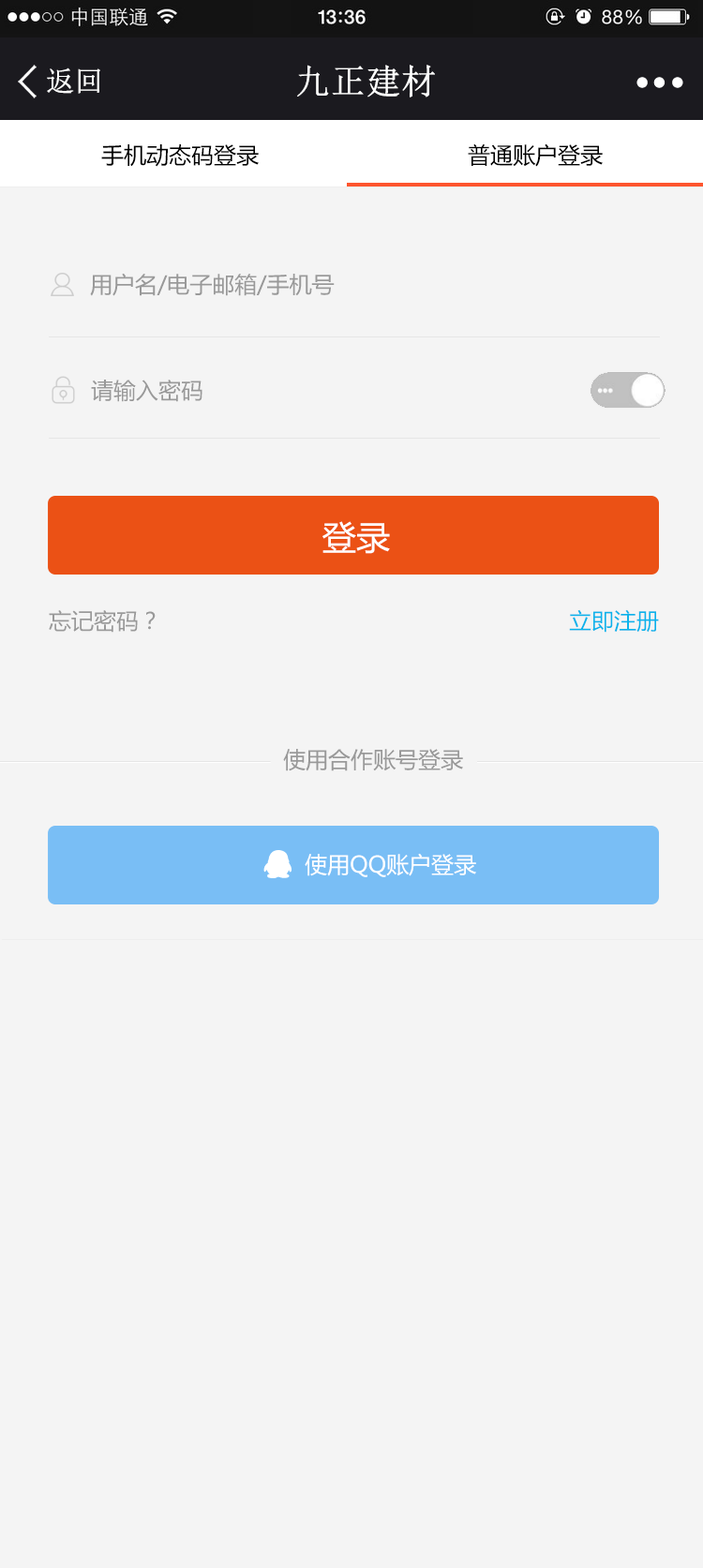
<style>
.page{position:relative;width:703px;height:1568px;background:#f4f4f4}
.page>*{position:absolute;margin:0}
.t1{font:34.4px "NSimSun";color:#ffffff;font-weight:bold}
.t2{font:28.1px "NSimSun";color:#ffffff;font-weight:bold}
.t3{font:22.5px "MicrosoftYaHei";color:#000000}
.t4{font:22.5px "MicrosoftYaHei";color:#999999}
.t5{font:33.7px "MicrosoftYaHei";color:#ffffff}
.t6{font:22.5px "MicrosoftYaHei";color:#0bb3eb}
.t7{font:22.5px "MicrosoftYaHei";color:#ffffff}
</style>
<div class="page">
<p class="t1" style="left:297px;top:65px;width:138px;height:32px">九正建材</p>
<p class="t2" style="left:47px;top:67px;width:53px;height:27px">返回</p>
<p class="t3" style="left:101px;top:144px;width:158px;height:23px">手机动态码登录</p>
<p class="t3" style="left:468px;top:143px;width:135px;height:24px">普通账户登录</p>
<p class="t4" style="left:90px;top:273px;width:245px;height:23px">用户名/电子邮箱/手机号</p>
<p class="t4" style="left:91px;top:380px;width:111px;height:22px">请输入密码</p>
<p class="t5" style="left:322px;top:521px;width:68px;height:33px">登录</p>
<p class="t4" style="left:49px;top:610px;width:107px;height:23px">忘记密码？</p>
<p class="t6" style="left:569px;top:609px;width:90px;height:24px">立即注册</p>
<p class="t4" style="left:283px;top:749px;width:180px;height:22px">使用合作账号登录</p>
<p class="t7" style="left:305px;top:853px;width:171px;height:24px">使用QQ账户登录</p>
</div>
